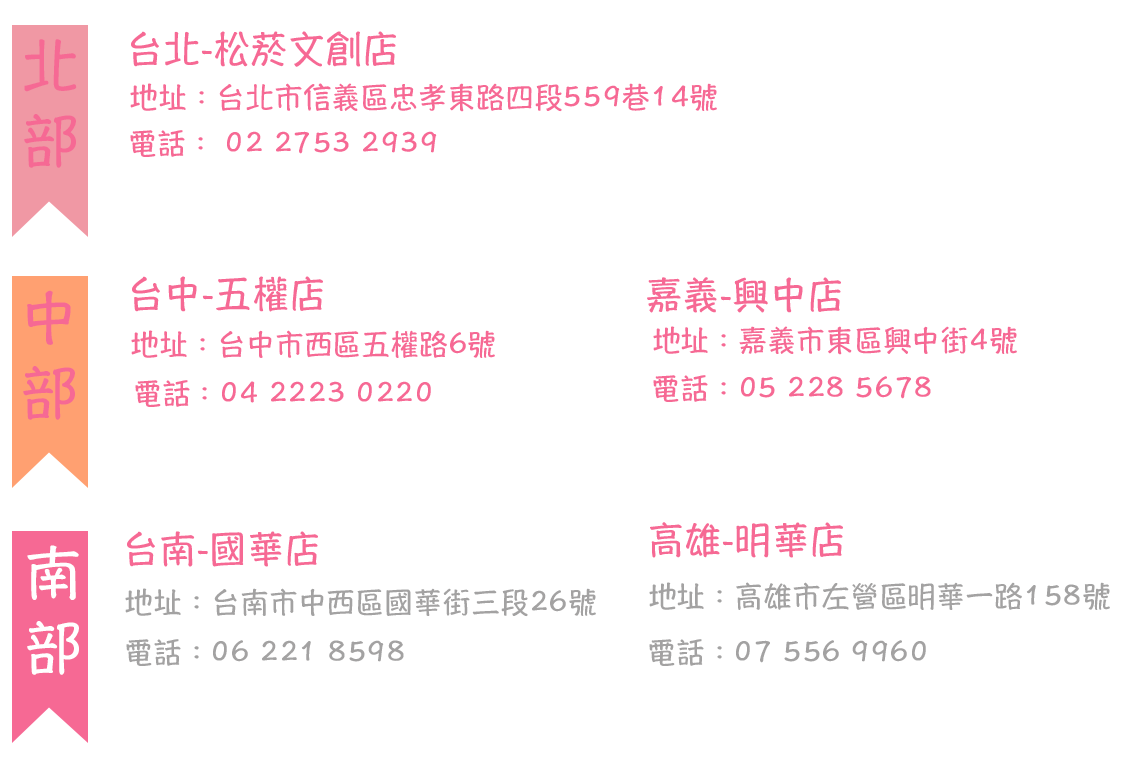
<style>
.page{position:relative;width:1122px;height:768px;background:#ffffff}
.page>*{position:absolute;margin:0}
.t1{font:58.3px/75px "HannotateTC-W7";letter-spacing:-0.01em;color:#f66994;text-transform:uppercase}
.t2{font:37.5px "HannotateTC-W7";letter-spacing:-0.01em;color:#f66994;text-transform:uppercase}
.t3{font:29.2px "HannotateTC-W7";letter-spacing:-0.01em;color:#f66994;text-transform:uppercase}
.t4{font:58.3px/75px "HannotateTC-W7";letter-spacing:-0.01em;color:#ffffff;text-transform:uppercase}
.t5{font:29.2px "HannotateTC-W7";letter-spacing:-0.01em;color:#a3a2a2;text-transform:uppercase}
</style>
<div class="page">
<p class="t1" style="left:24px;top:39px;width:53px;height:129px;text-align:center">北<br>部</p>
<p class="t2" style="left:131px;top:31px;width:265px;height:36px">台北-松菸文創店</p>
<p class="t3" style="left:130px;top:83px;width:587px;height:29px">地址：台北市信義區忠孝東路四段559巷14號</p>
<p class="t3" style="left:130px;top:130px;width:307px;height:27px">電話： 02 2753 2939</p>
<p class="t2" style="left:132px;top:276px;width:191px;height:36px">台中-五權店</p>
<p class="t2" style="left:647px;top:277px;width:194px;height:36px">嘉義-興中店</p>
<p class="t1" style="left:23px;top:290px;width:52px;height:130px;text-align:center">中<br>部</p>
<p class="t3" style="left:653px;top:326px;width:364px;height:29px">地址：嘉義市東區興中街4號</p>
<p class="t3" style="left:131px;top:330px;width:364px;height:28px">地址：台中市西區五權路6號</p>
<p class="t3" style="left:653px;top:375px;width:278px;height:27px">電話：05 228 5678</p>
<p class="t3" style="left:135px;top:380px;width:296px;height:27px">電話：04 2223 0220</p>
<p class="t2" style="left:127px;top:531px;width:191px;height:36px">台南-國華店</p>
<p class="t2" style="left:650px;top:522px;width:193px;height:36px">高雄-明華店</p>
<p class="t4" style="left:27px;top:545px;width:52px;height:130px;text-align:center">南<br>部</p>
<p class="t5" style="left:649px;top:582px;width:461px;height:28px">地址：高雄市左營區明華一路158號</p>
<p class="t5" style="left:125px;top:588px;width:471px;height:29px">地址：台南市中西區國華街三段26號</p>
<p class="t5" style="left:126px;top:639px;width:278px;height:27px">電話：06 221 8598</p>
<p class="t5" style="left:649px;top:639px;width:277px;height:27px">電話：07 556 9960</p>
</div>
